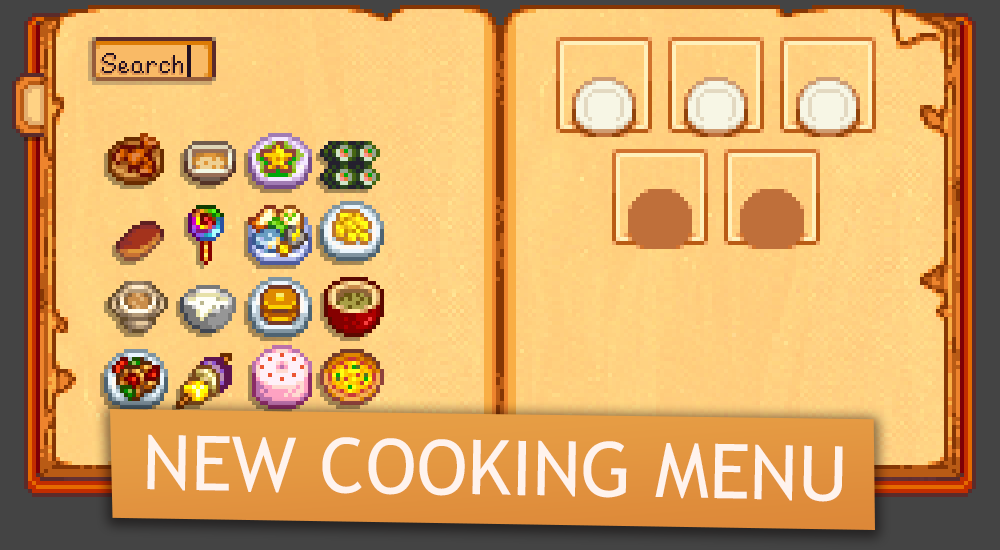
<style>
.page{position:relative;width:1000px;height:550px}
.page>*{position:absolute;margin:0}
.t1{font:76px "TrebuchetMS";color:#fff3ed}
</style>
<div class="page">
<p class="t1" style="left:147px;top:434px;width:696px;height:68px;rotate:1deg">NEW COOKING MENU</p>
</div>
